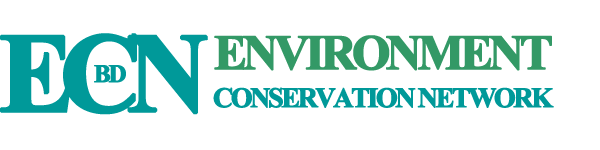
<style>
.page{position:relative;width:600px;height:150px;background:#ffffff}
.page>*{position:absolute;margin:0}
.t1{font:112.5px "TimesNewRomanPS-BoldMT";letter-spacing:-0.15em;color:#009999;font-weight:bold}
.t2{font:49.2px "TimesNewRomanPS-BoldMT";letter-spacing:-0.11em;color:#339966;font-weight:bold}
.t3{font:25px "TimesNewRomanPS-BoldMT";letter-spacing:-0.11em;color:#009999;font-weight:bold}
.t4{font:27.9px "TimesNewRomanPS-BoldMT";letter-spacing:-0.11em;color:#009999;font-weight:bold}
</style>
<div class="page">
<p class="t1" style="left:0px;top:33px;width:208px;height:82px">ECN</p>
<p class="t2" style="left:214px;top:35px;width:338px;height:36px">ENVIRONMENT</p>
<p class="t3" style="left:94px;top:65px;width:32px;height:18px">BD</p>
<p class="t4" style="left:213px;top:87px;width:341px;height:21px">CONSERVATION NETWORK</p>
</div>
